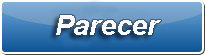
<style>
.page{position:relative;width:205px;height:55px}
.page>*{position:absolute;margin:0}
.t1{font:27.7px "Arial-BoldItalicMT";color:#fbfbfc}
</style>
<div class="page">
<p class="t1" style="left:56px;top:15px;width:105px;height:20px">Parecer</p>
</div>
